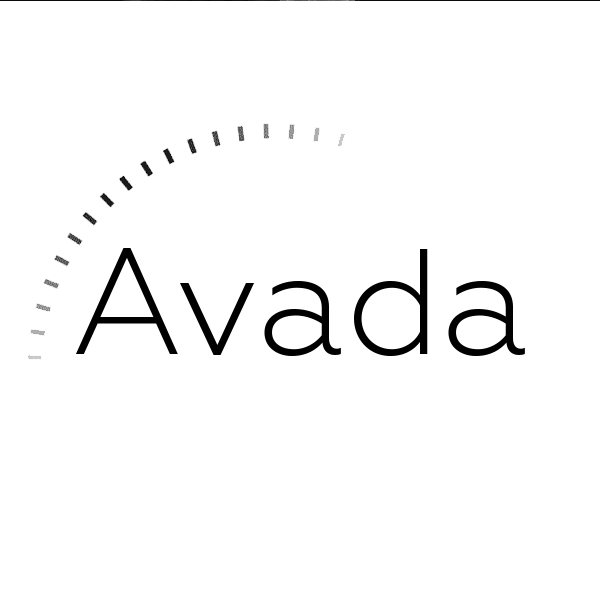
<style>
.page{position:relative;width:600px;height:600px;background:#ffffff}
.page>*{position:absolute;margin:0}
.t1{font:150px "Geometria-Light";color:#000000}
</style>
<div class="page">
<p class="t1" style="left:76px;top:247px;width:449px;height:108px">Avada</p>
</div>
